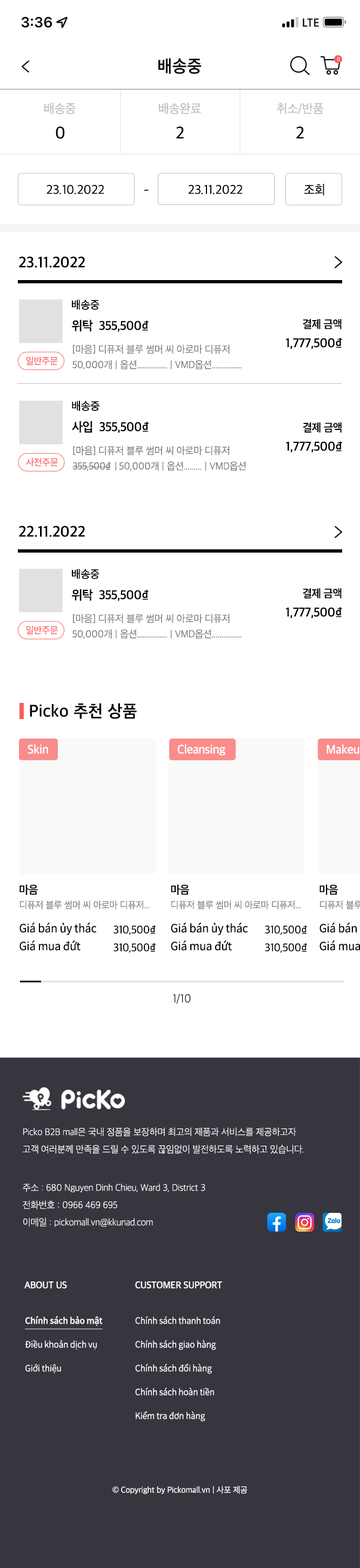
<style>
.page{position:relative;width:360px;height:1568px;background:#ffffff}
.page>*{position:absolute;margin:0}
.t1{font:17.3px "AppleSDGothicNeo-SemiBold";letter-spacing:0.017em;color:#000000}
.t2{font:5.3px "AppleSDGothicNeo-UltraLight";letter-spacing:-0.01em;color:#ffffff}
.t3{font:13px "AppleSDGothicNeo-Regular";letter-spacing:-0.01em;color:#bdbdbd;scale:0.97 1}
.t4{font:17.3px "AppleSDGothicNeo-Medium";letter-spacing:-0.01em;color:#020202;scale:0.97 1}
.t5{font:13px "AppleSDGothicNeo-Regular";letter-spacing:-0.01em;color:#000000;scale:0.97 1}
.t6{font:12.6px "AppleSDGothicNeo-Regular";letter-spacing:-0.01em;color:#000000;scale:0.97 1}
.t7{font:15.5px "AppleSDGothicNeo-SemiBold";letter-spacing:-0.01em;color:#000000}
.t8{font:11.4px "AppleSDGothicNeo-Medium";letter-spacing:-0.01em;color:#000000}
.t9{font:13px "AppleSDGothicNeo-SemiBold";letter-spacing:-0.022em;color:#010101;scale:0.96 1}
.t10{font:13px "NotoSansCJKkr-Medium";letter-spacing:-0.022em;color:#010101;scale:0.96 1}
.t11{font:13px/18.5px "AppleSDGothicNeo-SemiBold";letter-spacing:-0.022em;color:#000000;scale:0.96 1}
.t12{font:11.4px/18.5px "AppleSDGothicNeo-SemiBold";letter-spacing:-0.022em;color:#000000;scale:0.96 1}
.t13{font:13px/19.5px "NotoSansCJKkr-Medium";letter-spacing:-0.022em;color:#000000;scale:0.96 1}
.t14{font:10.3px/15.4px "AppleSDGothicNeo-Light";letter-spacing:-0.01em;color:#757575;scale:0.97 1}
.t15{font:10.3px/13.2px "AppleSDGothicNeo-Light";letter-spacing:-0.01em;color:#757575;scale:0.97 1}
.t16{font:9.7px "AppleSDGothicNeo-Regular";letter-spacing:-0.01em;color:#fa5e5e;scale:0.97 1}
.t17{font:11.4px "AppleSDGothicNeo-Medium";letter-spacing:-0.01em;color:#000000;scale:0.97 1}
.t18{font:10.3px/15.5px "AppleSDGothicNeo-Light";letter-spacing:-0.01em;color:#757575;scale:0.97 1}
.t19{font:10.3px/15.5px "AppleSDGothicNeo-Light";letter-spacing:-0.01em;color:#727272;scale:0.97 1}
.t20{font:10.3px/13.2px "AppleSDGothicNeo-Light";letter-spacing:-0.01em;color:#727272;scale:0.97 1}
.t21{font:10.3px/15.5px "AppleSDGothicNeo-Light";letter-spacing:-0.022em;color:#727272;scale:0.96 1}
.t22{font:10.3px/15.5px "NotoSansCJKkr-DemiLight";letter-spacing:-0.022em;color:#727272;scale:0.96 1}
.t23{font:9.8px "AppleSDGothicNeo-Regular";letter-spacing:-0.01em;color:#fa5e5e;scale:0.97 1}
.t24{font:12.4px "AppleSDGothicNeo-SemiBold";letter-spacing:-0.01em;color:#fefeff}
.t25{font:9.7px/14.6px "AppleSDGothicNeo-Light";letter-spacing:-0.01em;color:#757575}
.t26{font:11.3px/14.6px "AppleSDGothicNeo-SemiBold";letter-spacing:-0.01em;color:#000000}
.t27{font:9.7px/12.4px "AppleSDGothicNeo-Light";letter-spacing:-0.01em;color:#757575}
.t28{font:11.3px/17.8px "NotoSansCJKkr-Regular";letter-spacing:-0.01em;color:#000000}
.t29{font:11.3px/17.8px "AppleSDGothicNeo-Regular";letter-spacing:-0.022em;color:#000000;scale:0.96 1}
.t30{font:11.3px/17.8px "NotoSansCJKkr-Regular";letter-spacing:-0.022em;color:#000000;scale:0.96 1}
.t31{font:11.9px "AppleSDGothicNeo-UltraLight";letter-spacing:-0.01em;color:#000000}
.t32{font:9.7px/17.3px "AppleSDGothicNeo-UltraLight";letter-spacing:-0.01em;color:#ffffff;scale:0.97 1}
.t33{font:9.7px "AppleSDGothicNeo-SemiBold";letter-spacing:-0.01em;color:#ffffff;scale:0.97 1}
.t34{font:9.7px "AppleSDGothicNeo-SemiBold";letter-spacing:-0.01em;color:#ffffff;text-transform:uppercase;scale:0.97 1}
.t35{font:8.7px/23.8px "NotoSansCJKkr-DemiLight";letter-spacing:-0.01em;color:#ffffff;scale:0.97 1}
.t36{font:8.7px/23.8px "NotoSansCJKkr-Medium";letter-spacing:-0.01em;color:#ffffff;text-decoration:underline;scale:0.97 1}
.t37{font:8.7px "AppleSDGothicNeo-Regular";letter-spacing:-0.01em;color:#ffffff;scale:0.97 1}
</style>
<div class="page">
<p class="t1" style="left:158px;top:58px;width:44px;height:16px">배송중</p>
<p class="t2" style="left:337px;top:57px;width:3px;height:4px">0</p>
<p class="t3" style="left:44px;top:103px;width:32px;height:12px">배송중</p>
<p class="t3" style="left:159px;top:103px;width:42px;height:12px">배송완료</p>
<p class="t3" style="left:277px;top:103px;width:47px;height:12px">취소/반품</p>
<p class="t4" style="left:56px;top:127px;width:9px;height:12px">0</p>
<p class="t4" style="left:176px;top:127px;width:8px;height:11px">2</p>
<p class="t4" style="left:296px;top:127px;width:8px;height:11px">2</p>
<p class="t5" style="left:46px;top:185px;width:58px;height:10px">23.10.2022</p>
<p class="t5" style="left:188px;top:185px;width:55px;height:10px">23.11.2022</p>
<p class="t5" style="left:304px;top:184px;width:20px;height:12px">조회</p>
<p class="t6" style="left:144px;top:190px;width:5px;height:1px">-</p>
<p class="t7" style="left:19px;top:256px;width:66px;height:12px">23.11.2022</p>
<p class="t8" style="left:72px;top:300px;width:27px;height:10px">배송중</p>
<p class="t9" style="left:71px;top:320px;width:78px;height:12px">위탁  355,500<span class="t10">₫</span></p>
<p class="t11" style="left:286px;top:319px;width:56px;height:30px;text-align:right"><span class="t12">결제 금액<br></span>1,777,500<span class="t13">₫</span></p>
<p class="t14" style="left:72px;top:344px;width:170px;height:26px">[마음] 디퓨저 블루 썸머 씨 아로마 <span class="t15">디퓨저<br></span>50,000개 | 옵션............... | VMD옵션...............</p>
<p class="t16" style="left:26px;top:356px;width:32px;height:10px">일반주문</p>
<p class="t17" style="left:72px;top:401px;width:27px;height:10px">배송중</p>
<p class="t9" style="left:72px;top:421px;width:77px;height:12px">사입  355,500<span class="t10">₫</span></p>
<p class="t11" style="left:286px;top:422px;width:56px;height:31px;text-align:right"><span class="t12">결제 금액<br></span>1,777,500<span class="t13">₫</span></p>
<p class="t18" style="left:72px;top:446px;width:174px;height:25px"><span class="t19">[마음] 디퓨저 블루 썸머 씨 아로마 </span><span class="t20">디퓨저<br></span><span class="t21">355,500</span><span class="t22">₫  </span><span class="t19">| </span>50,000개 | 옵션......... | VMD옵션</p>
<p class="t23" style="left:26px;top:457px;width:32px;height:10px">사전주문</p>
<p class="t7" style="left:19px;top:526px;width:66px;height:11px">22.11.2022</p>
<p class="t8" style="left:72px;top:569px;width:27px;height:10px">배송중</p>
<p class="t9" style="left:71px;top:589px;width:78px;height:12px">위탁  355,500<span class="t10">₫</span></p>
<p class="t11" style="left:286px;top:588px;width:56px;height:31px;text-align:right"><span class="t12">결제 금액<br></span>1,777,500<span class="t13">₫</span></p>
<p class="t14" style="left:72px;top:614px;width:170px;height:25px">[마음] 디퓨저 블루 썸머 씨 아로마 <span class="t15">디퓨저<br></span>50,000개 | 옵션............... | VMD옵션...............</p>
<p class="t16" style="left:26px;top:626px;width:32px;height:9px">일반주문</p>
<p class="t1" style="left:30px;top:703px;width:107px;height:16px">Picko 추천 상품</p>
<p class="t24" style="left:28px;top:744px;width:20px;height:10px">Skin</p>
<p class="t24" style="left:177px;top:744px;width:48px;height:11px">Cleansing</p>
<p class="t25" style="left:19px;top:885px;width:130px;height:24px"><span class="t26">마음<br></span>디퓨저 블루 썸머 씨 아로마 <span class="t27">디퓨저...</span></p>
<p class="t25" style="left:171px;top:885px;width:130px;height:24px"><span class="t26">마음<br></span>디퓨저 블루 썸머 씨 아로마 <span class="t27">디퓨저...</span></p>
<p class="t28" style="left:19px;top:922px;width:78px;height:29px">Giá bán ủy thác<br>Giá mua đứt</p>
<p class="t29" style="left:114px;top:925px;width:42px;height:28px;text-align:right">310,500<span class="t30">₫<br></span>310,500<span class="t30">₫</span></p>
<p class="t28" style="left:171px;top:922px;width:77px;height:29px">Giá bán ủy thác<br>Giá mua đứt</p>
<p class="t29" style="left:265px;top:925px;width:42px;height:28px;text-align:right">310,500<span class="t30">₫<br></span>310,500<span class="t30">₫</span></p>
<p class="t31" style="left:173px;top:993px;width:18px;height:11px">1/10</p>
<p class="t32" style="left:23px;top:1127px;width:281px;height:27px">Picko B2B mall은 국내 정품을 보장하며 최고의 제품과 서비스를 제공하고자<br>고객 여러분께 만족을 드릴 수 있도록 끊임없이 발전하도록 노력하고 있습니다.</p>
<p class="t32" style="left:23px;top:1184px;width:182px;height:43px">주소 : 680 Nguyen Dinh Chieu, Ward 3, District 3<br>전화번호 : 0966 469 695<br>이메일 : pickomall.vn@kkunad.com</p>
<p class="t33" style="left:24px;top:1281px;width:43px;height:7px">ABOUT US</p>
<p class="t34" style="left:135px;top:1281px;width:87px;height:7px">Customer Support</p>
<p class="t35" style="left:25px;top:1315px;width:78px;height:58px"><span class="t36">Chính sách bảo mật<br></span>Điều khoản dịch vụ<br>Giới thiệu</p>
<p class="t35" style="left:135px;top:1316px;width:85px;height:105px">Chính sách thanh toán<br>Chính sách giao hàng<br>Chính sách đổi hàng<br>Chính sách hoàn tiền<br>Kiểm tra đơn hàng</p>
<p class="t37" style="left:112px;top:1486px;width:136px;height:8px">© Copyright by Pickomall.vn | 사포 제공</p>
</div>
